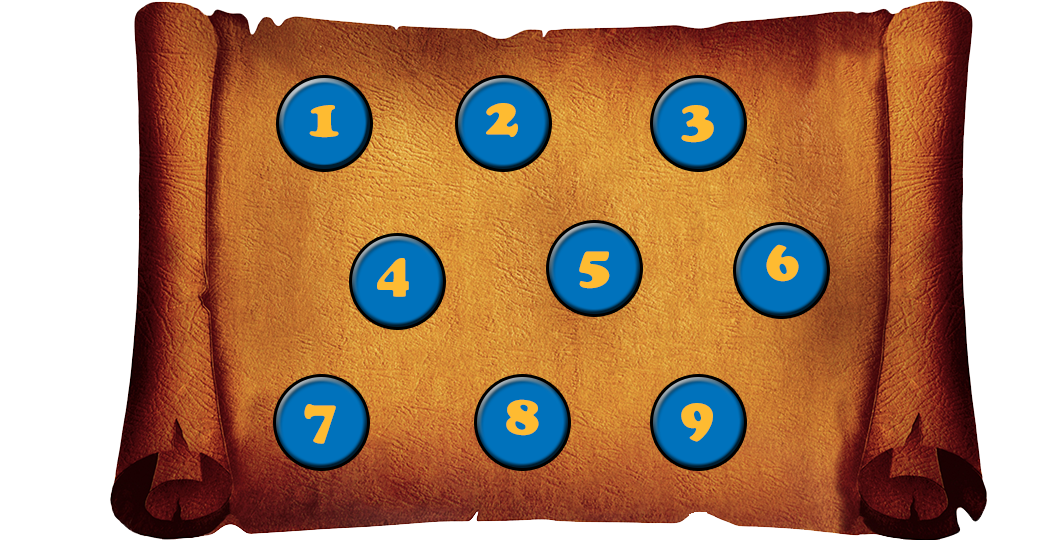
<style>
.page{position:relative;width:1054px;height:540px;background:#ffffff}
.page>*{position:absolute;margin:0}
.t1{font:53.3px "CooperBlackStd";color:#febb31}
</style>
<div class="page">
<p class="t1" style="left:309px;top:105px;width:30px;height:33px">1</p>
<p class="t1" style="left:486px;top:103px;width:32px;height:34px">2</p>
<p class="t1" style="left:681px;top:105px;width:33px;height:38px">3</p>
<p class="t1" style="left:766px;top:244px;width:33px;height:38px">6</p>
<p class="t1" style="left:579px;top:251px;width:31px;height:38px">5</p>
<p class="t1" style="left:377px;top:258px;width:32px;height:39px">4</p>
<p class="t1" style="left:506px;top:399px;width:33px;height:37px">8</p>
<p class="t1" style="left:304px;top:404px;width:32px;height:40px">7</p>
<p class="t1" style="left:681px;top:403px;width:32px;height:39px">9</p>
</div>
